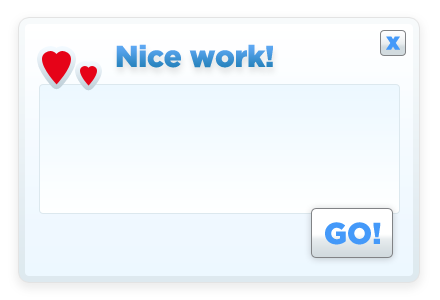
<style>
.page{position:relative;width:440px;height:300px}
.page>*{position:absolute;margin:0}
.t1{font:24px "Gotham-Black";color:#4499f9}
.t2{font:30px "Gotham-Black";letter-spacing:-0.01em;color:#4194d6}
.t3{font:30px "Gotham-Black";color:#4499f9}
</style>
<div class="page">
<p class="t1" style="left:386px;top:36px;width:14px;height:14px">x</p>
<p class="t2" style="left:116px;top:44px;width:157px;height:24px">Nice work!</p>
<p class="t3" style="left:325px;top:222px;width:56px;height:23px">GO!</p>
</div>
